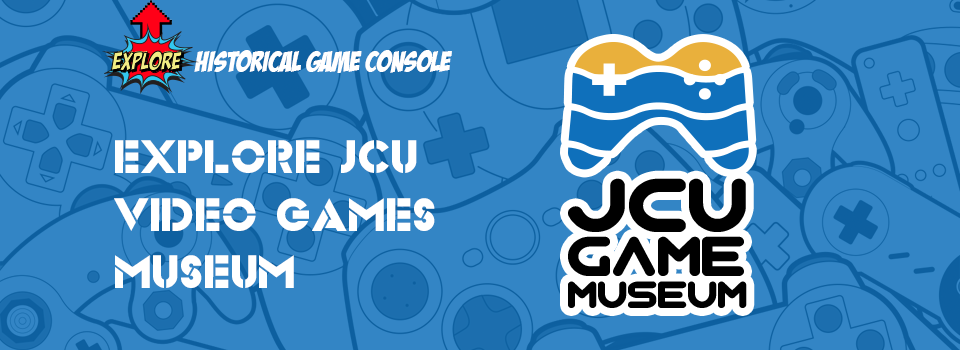
<style>
.page{position:relative;width:960px;height:350px;background:#3385c5}
.page>*{position:absolute;margin:0}
.t1{font:29.2px "BadaBoomBB";color:#ffffff}
.t2{font:48px "Videopac";color:#ffffff}
</style>
<div class="page">
<p class="t1" style="left:194px;top:50px;width:258px;height:23px">HISTORICAL GAME CONSOLE</p>
<p class="t2" style="left:114px;top:140px;width:321px;height:148px">EXPLORE JCU<br>VIDEO GAMES<br>MUSEUM</p>
</div>
